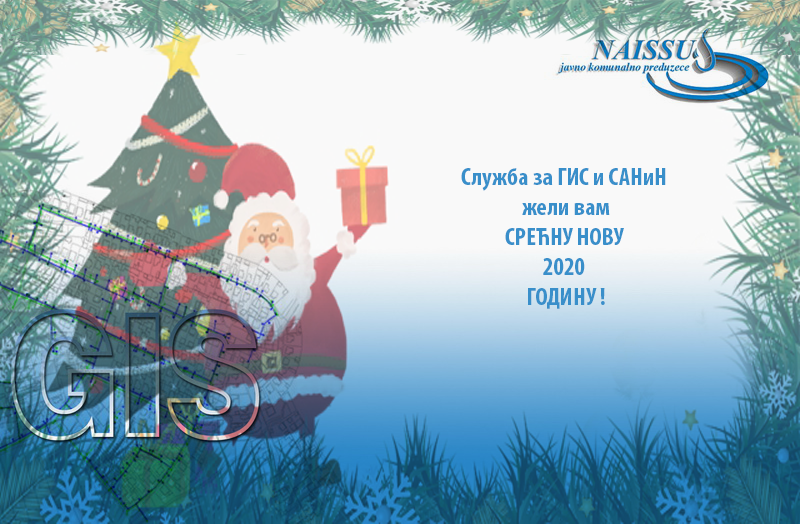
<style>
.page{position:relative;width:800px;height:524px;background:#f9f9f9}
.page>*{position:absolute;margin:0}
.t1{font:25px "MyriadPro-BoldCond";color:#398fca}
</style>
<div class="page">
<p class="t1" style="left:461px;top:168px;width:205px;height:141px;text-align:center">Служба за ГИС и САНиН <br>жели вам<br>СРЕЋНУ НОВУ <br>2020 <br>ГОДИНУ !</p>
</div>
